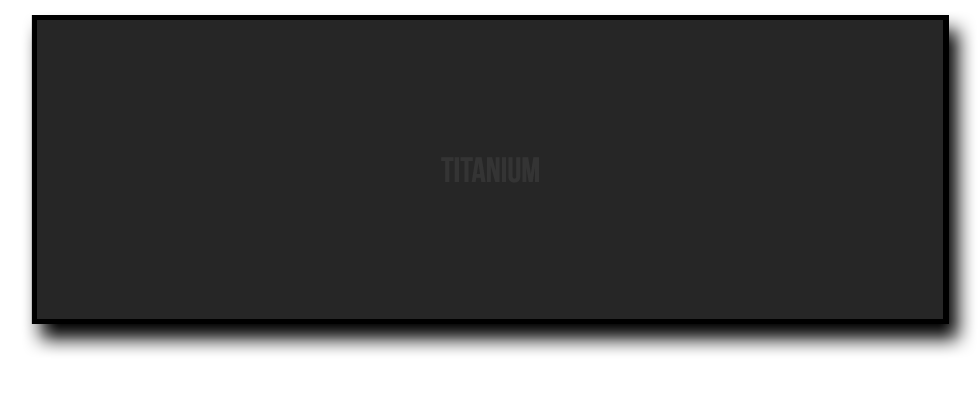
<style>
.page{position:relative;width:980px;height:410px;background:#262626}
.page>*{position:absolute;margin:0}
.t1{font:35px "BebasNeue";color:#343434}
</style>
<div class="page">
<p class="t1" style="left:441px;top:157px;width:98px;height:26px">titanium</p>
</div>
